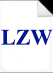
<style>
.page{position:relative;width:53px;height:73px;background:#ffffff}
.page>*{position:absolute;margin:0}
.t1{font:22px "TimesNewRomanPS-BoldMT";color:#001693}
</style>
<div class="page">
<p class="t1" style="left:1px;top:29px;width:52px;height:16px">LZW</p>
</div>
